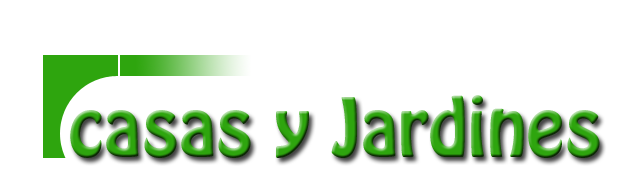
<style>
.page{position:relative;width:640px;height:180px;background:#ffffff}
.page>*{position:absolute;margin:0}
.t1{font:72px "HoboStd"}
</style>
<div class="page">
<p class="t1" style="left:70px;top:95px;width:530px;height:63px">casas y Jardines</p>
</div>
